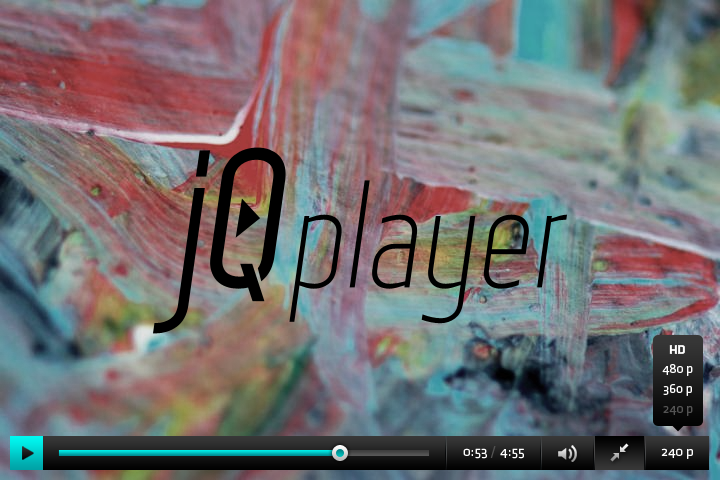
<style>
.page{position:relative;width:720px;height:480px}
.page>*{position:absolute;margin:0}
.t1{font:13px "KlavikaBold-OSF";color:#ffffff}
.t2{font:13px "KlavikaRegular-OSF";color:#ffffff}
.t3{font:13px "KlavikaRegular-OSF";color:#545454}
.t4{font:14px "KlavikaRegular-OSF";color:#ffffff}
.t5{font:14px "KlavikaRegular-OSF";color:#525252}
</style>
<div class="page">
<p class="t1" style="left:669px;top:345px;width:16px;height:9px">HD</p>
<p class="t2" style="left:662px;top:364px;width:31px;height:12px">480 p</p>
<p class="t2" style="left:663px;top:384px;width:29px;height:12px">360 p</p>
<p class="t3" style="left:663px;top:406px;width:30px;height:10px">240 p</p>
<p class="t4" style="left:463px;top:446px;width:61px;height:13px">0:53 <span class="t5">/</span> 4:55</p>
<p class="t4" style="left:661px;top:448px;width:32px;height:11px">240 p</p>
</div>
